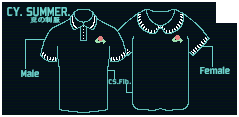
<style>
.page{position:relative;width:239px;height:117px;background:#050f1c}
.page>*{position:absolute;margin:0}
.t1{font:14.1px "Bombardier";color:#6cd1cb}
.t2{font:6.7px "AdobeHeitiStd-Regular";color:#6cd1cb;scale:1.13 1}
.t3{font:6.7px "FZFENGRSTS-EB--GB1-0";color:#6cd1cb;scale:1.13 1}
.t4{font:10.6px "Bombardier";color:#6cd1cb}
.t5{font:7.2px "Bombardier";color:#6cd1cb;scale:1.22 1}
.t6{font:7.2px "AdobeHeitiStd-Regular";color:#6cd1cb;scale:1.22 1}
</style>
<div class="page">
<p class="t1" style="left:7px;top:7px;width:63px;height:9px">CY. SUMMER.</p>
<p class="t2" style="left:30px;top:16px;width:30px;height:8px"><span class="t3">夏</span>の制服</p>
<p class="t4" style="left:21px;top:69px;width:18px;height:8px">Male</p>
<p class="t5" style="left:108px;top:78px;width:23px;height:7px">CS.Fib<span class="t6">.</span></p>
<p class="t4" style="left:200px;top:66px;width:30px;height:8px">Female</p>
</div>
